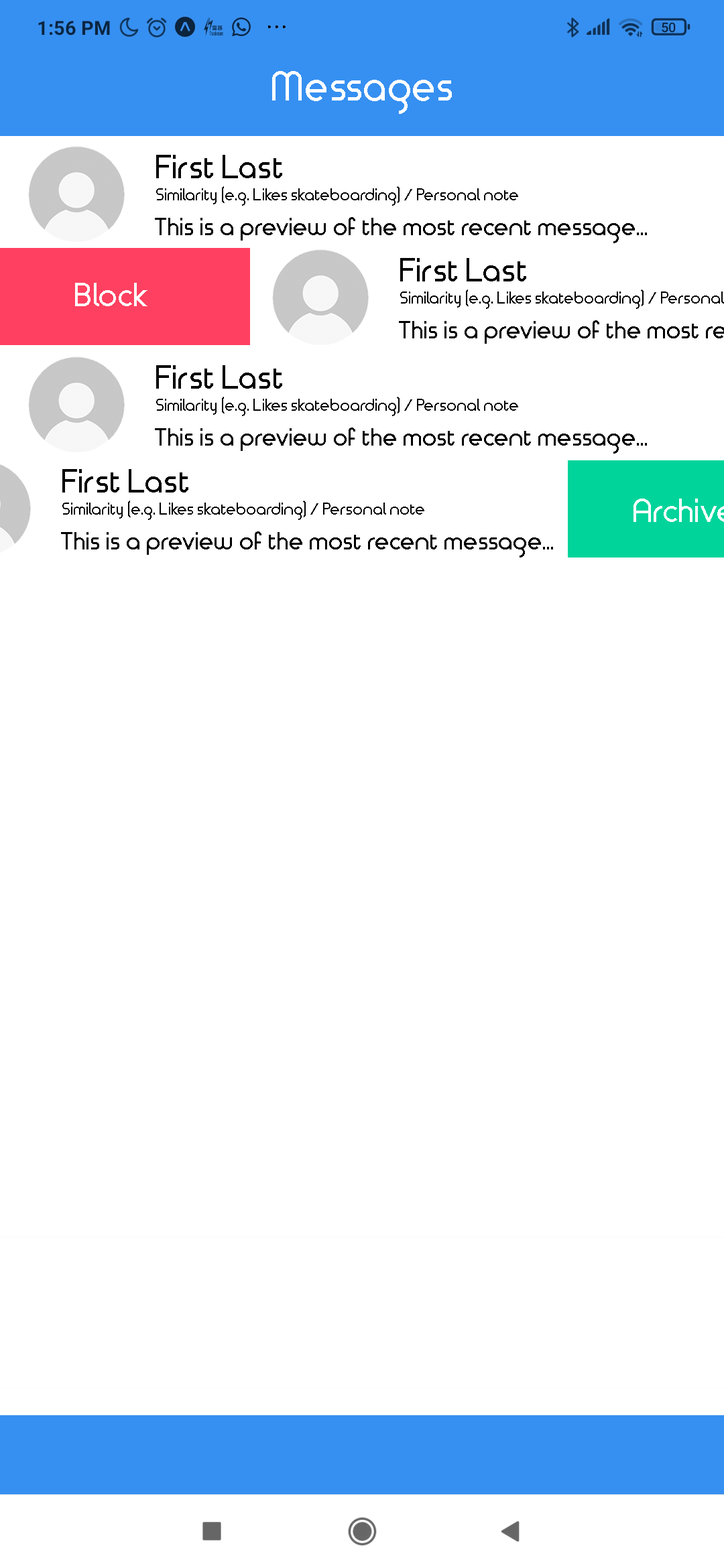
<style>
.page{position:relative;width:724px;height:1568px;background:#ffffff}
.page>*{position:absolute;margin:0}
.t1{font:40.2px "TimeBurner-Bold";color:#ffffff}
.t2{font:32.2px "TimeBurner-Bold";color:#000000}
.t3{font:16.1px "TimeBurner-Bold";color:#000000}
.t4{font:24.1px "TimeBurner-Bold";color:#000000}
.t5{font:32.2px "TimeBurner-Bold";color:#ffffff}
</style>
<div class="page">
<p class="t1" style="left:272px;top:71px;width:180px;height:43px">Messages</p>
<p class="t2" style="left:156px;top:155px;width:126px;height:23px">First Last</p>
<p class="t3" style="left:156px;top:186px;width:362px;height:20px">Similarity (e.g. Likes skateboarding) / Personal note</p>
<p class="t4" style="left:155px;top:217px;width:492px;height:26px">This is a preview of the most recent message...</p>
<p class="t2" style="left:400px;top:258px;width:126px;height:23px">First Last</p>
<p class="t5" style="left:75px;top:283px;width:72px;height:23px">Block</p>
<p class="t2" style="left:156px;top:365px;width:126px;height:24px">First Last</p>
<p class="t3" style="left:156px;top:397px;width:362px;height:19px">Similarity (e.g. Likes skateboarding) / Personal note</p>
<p class="t4" style="left:155px;top:428px;width:492px;height:26px">This is a preview of the most recent message...</p>
<p class="t2" style="left:62px;top:469px;width:126px;height:24px">First Last</p>
<p class="t3" style="left:62px;top:501px;width:362px;height:19px">Similarity (e.g. Likes skateboarding) / Personal note</p>
<p class="t4" style="left:61px;top:531px;width:492px;height:27px">This is a preview of the most recent message...</p>
</div>
